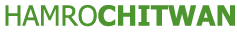
<style>
.page{position:relative;width:237px;height:32px;background:#ffffff}
.page>*{position:absolute;margin:0}
.t1{font:27.8px "Tahoma-Bold";color:#4d952f}
.t2{font:27.8px "Tahoma";color:#4d952f}
</style>
<div class="page">
<p class="t1" style="left:5px;top:5px;width:230px;height:22px"><span class="t2">HAMRO</span>CHITWAN</p>
</div>
